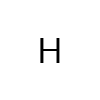
<style>
.page{position:relative;width:100px;height:100px;background:#ffffff}
.page>*{position:absolute;margin:0}
.t1{font:35px "OpenSans-Regular";color:#000000}
</style>
<div class="page">
<p class="t1" style="left:40px;top:38px;width:20px;height:25px">H</p>
</div>
